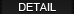
<style>
.page{position:relative;width:74px;height:14px}
.page>*{position:absolute;margin:0}
.t1{font:11px "ArialMT";color:#ffffff}
</style>
<div class="page">
<p class="t1" style="left:19px;top:3px;width:37px;height:8px">DETAIL</p>
</div>
